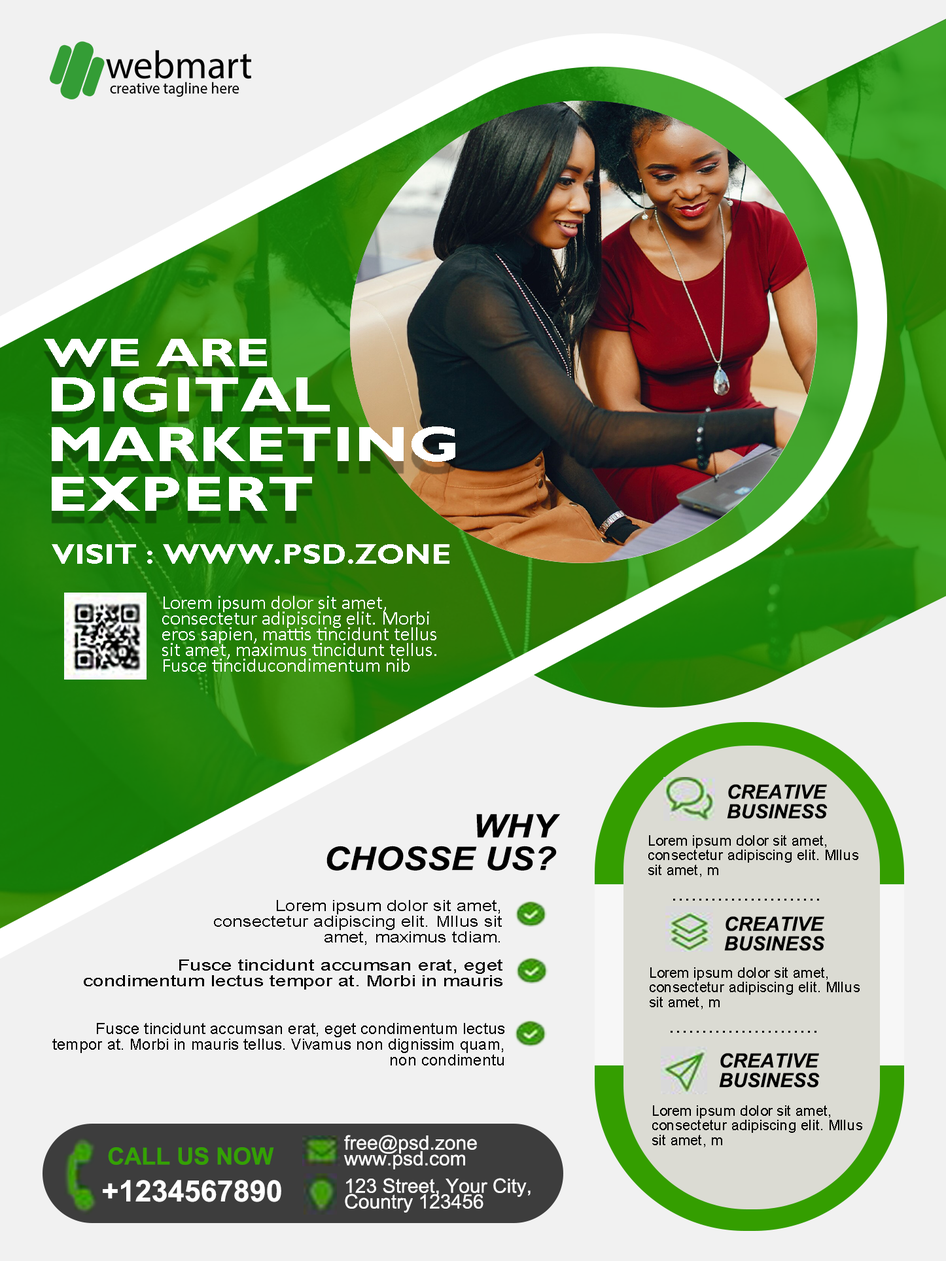
<style>
.page{position:relative;width:946px;height:1261px;background:#f1f1f1}
.page>*{position:absolute;margin:0}
.t1{font:40px "GillSansMT-Bold";color:#ffffff;scale:1.36 1}
.t2{font:50px/50px "GillSansMT-Bold";color:#ffffff;scale:1.29 1}
.t3{font:28px "GillSansMT-Bold";color:#ffffff;scale:1.12 1}
.t4{font:19.6px/15.7px "Calibri";color:#ffffff}
.t5{font:19.6px/19.6px "Arial-BoldItalicMT";color:#000000}
.t6{font:32.6px/32.6px "Arial-BoldItalicMT";color:#000000;scale:1.1 1}
.t7{font:14.5px/14.5px "ArialMT";color:#000000}
.t8{font:15.7px/15.7px "ArialMT";color:#000000;scale:1.16 1}
.t9{font:23.5px "ArialMT";color:#000000}
.t10{font:15.7px/15.7px "ArialMT";color:#000000;scale:1.27 1}
.t11{font:15.7px/15.7px "ArialMT";color:#000000}
.t12{font:19.6px/15.7px "ArialMT";color:#ffffff}
.t13{font:23.5px "Arial-BoldMT";color:#34a103}
.t14{font:29.4px "Arial-BoldMT";color:#ffffff}
</style>
<div class="page">
<p class="t1" style="left:44px;top:339px;width:223px;height:28px">WE ARE</p>
<p class="t2" style="left:52px;top:377px;width:403px;height:134px">DIGITAL<br>MARKETING<br>EXPERT</p>
<p class="t3" style="left:52px;top:544px;width:397px;height:20px">VISIT : WWW.PSD.ZONE</p>
<p class="t4" style="left:162px;top:596px;width:274px;height:76px">Lorem ipsum dolor sit amet, consectetur adipiscing elit. Morbi eros sapien, mattis tincidunt tellus sit amet, maximus tincidunt tellus. Fusce tinciducondimentum nib</p>
<p class="t5" style="left:727px;top:784px;width:100px;height:35px">CREATIVE BUSINESS</p>
<p class="t6" style="left:326px;top:814px;width:234px;height:56px;text-align:right">WHY<br>CHOSSE US?</p>
<p class="t7" style="left:648px;top:835px;width:210px;height:42px">Lorem ipsum dolor sit amet, consectetur adipiscing elit. Mllus sit amet, m</p>
<p class="t8" style="left:214px;top:900px;width:288px;height:45px;text-align:right">Lorem ipsum dolor sit amet, consectetur adipiscing elit. Mllus sit amet, maximus tdiam.</p>
<p class="t9" style="left:673px;top:899px;width:146px;height:2px">.......................</p>
<p class="t5" style="left:724px;top:916px;width:101px;height:35px">CREATIVE BUSINESS</p>
<p class="t10" style="left:84px;top:959px;width:418px;height:31px;text-align:right">Fusce tincidunt accumsan erat, eget condimentum lectus tempor at. Morbi in mauris</p>
<p class="t7" style="left:649px;top:967px;width:210px;height:42px">Lorem ipsum dolor sit amet, consectetur adipiscing elit. Mllus sit amet, m</p>
<p class="t11" style="left:52px;top:1023px;width:452px;height:42px;text-align:right">Fusce tincidunt accumsan erat, eget condimentum lectus tempor at. Morbi in mauris tellus. Vivamus non dignissim quam, non condimentu<br><br>m nibh. . Vestibulum viverra rhoncus sem, sed porttitor niserdiet lorem, sit amet</p>
<p class="t9" style="left:670px;top:1031px;width:146px;height:2px">.......................</p>
<p class="t5" style="left:719px;top:1053px;width:100px;height:35px">CREATIVE BUSINESS</p>
<p class="t7" style="left:652px;top:1105px;width:210px;height:42px">Lorem ipsum dolor sit amet, consectetur adipiscing elit. Mllus sit amet, m</p>
<p class="t12" style="left:344px;top:1135px;width:133px;height:34px">free@psd.zone<br>www.psd.com</p>
<p class="t13" style="left:108px;top:1147px;width:166px;height:18px">CALL US NOW</p>
<p class="t14" style="left:103px;top:1180px;width:178px;height:22px">+1234567890</p>
<p class="t12" style="left:345px;top:1178px;width:185px;height:35px">123 Street, Your City,<br>Country 123456</p>
</div>
